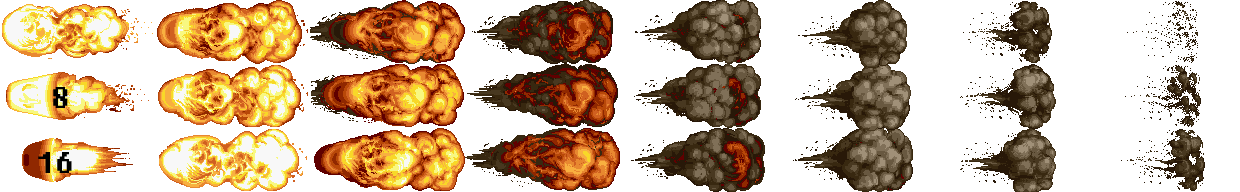
<style>
.page{position:relative;width:1240px;height:192px;background:#ffffff}
.page>*{position:absolute;margin:0}
.t1{font:30px "Fixedsys";color:#000000;text-transform:uppercase}
</style>
<div class="page">
<p class="t1" style="left:53px;top:87px;width:15px;height:21px">8</p>
<p class="t1" style="left:38px;top:152px;width:34px;height:21px">16</p>
</div>
